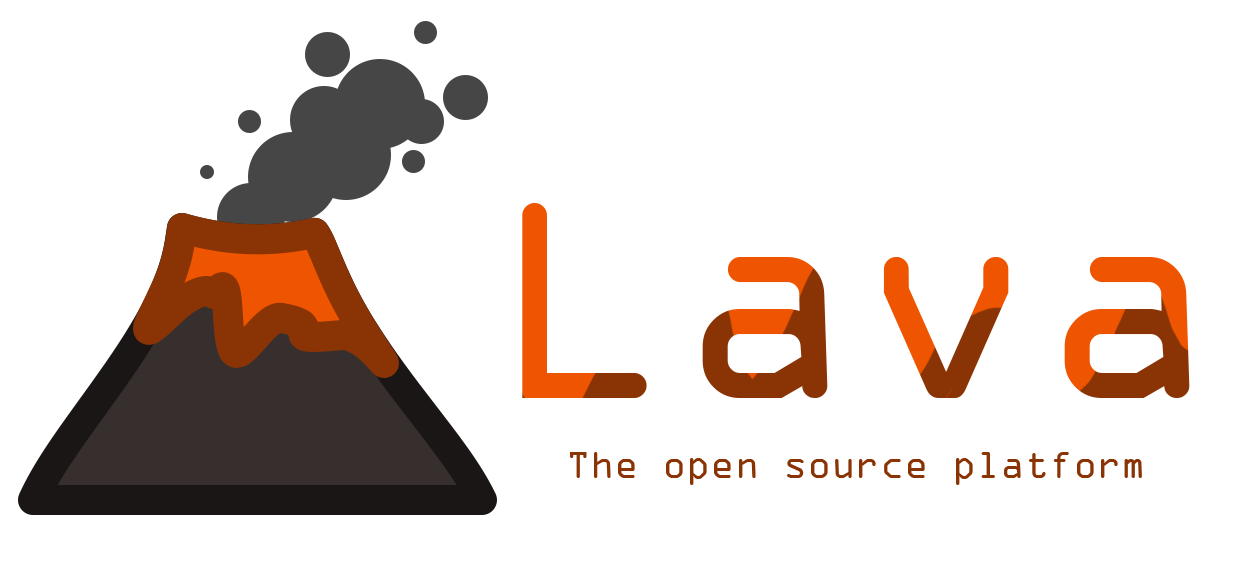
<style>
.page{position:relative;width:1248px;height:564px;background:#ffffff}
.page>*{position:absolute;margin:0}
.t1{font:300px "OCRAExtended"}
.t2{font:40px "OCRAExtended";color:#8a3405}
</style>
<div class="page">
<p class="t1" style="left:522px;top:203px;width:668px;height:195px">Lava</p>
<p class="t2" style="left:570px;top:452px;width:572px;height:33px">The open source platform</p>
</div>
